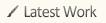
<style>
.page{position:relative;width:106px;height:23px;background:#fdfaf2}
.page>*{position:absolute;margin:0}
.t1{font:17.3px "Calibri";letter-spacing:-0.04em;scale:0.94 1}
</style>
<div class="page">
<p class="t1" style="left:24px;top:5px;width:73px;height:13px">Latest Work</p>
</div>
